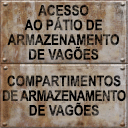
<style>
.page{position:relative;width:128px;height:128px}
.page>*{position:absolute;margin:0}
.t1{font:14.7px/14.7px "Arial-BoldMT";text-transform:uppercase;scale:0.82 1}
.t2{font:14.7px/14.7px "Arial-BoldMT";letter-spacing:-0.04em;text-transform:uppercase;scale:0.82 1}
</style>
<div class="page">
<p class="t1" style="left:7px;top:4px;width:112px;height:56px;text-align:center">Acesso<br>ao pátio de<br>armazenamento<br>de vagões</p>
<p class="t2" style="left:2px;top:75px;width:124px;height:41px;text-align:center"><span class="t1">Compartimentos<br></span>de armazenamento<br><span class="t1">de vagões</span></p>
</div>
